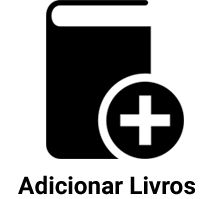
<style>
.page{position:relative;width:214px;height:199px;background:#ffffff}
.page>*{position:absolute;margin:0}
.t1{font:24.4px "Roboto-Bold";color:#000000}
</style>
<div class="page">
<p class="t1" style="left:18px;top:175px;width:177px;height:20px">Adicionar Livros</p>
</div>
